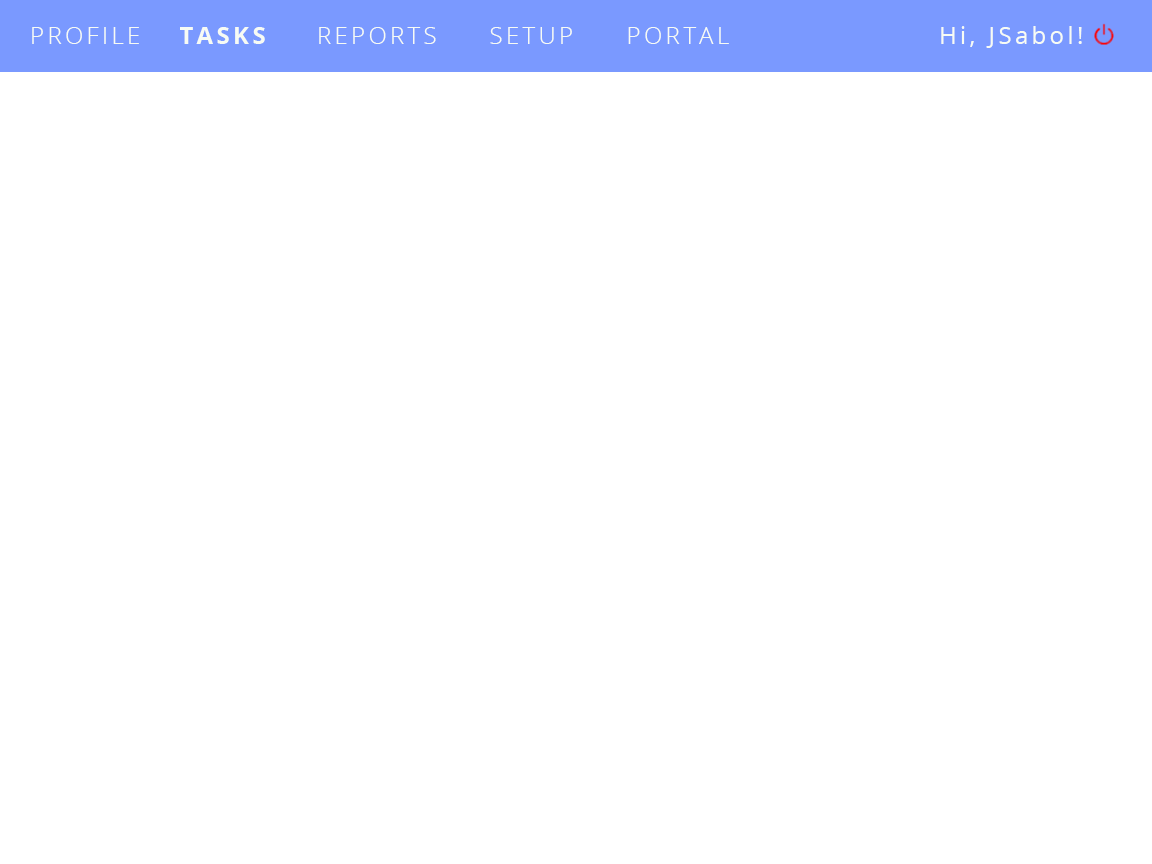
<style>
.page{position:relative;width:1152px;height:864px;background:#ffffff}
.page>*{position:absolute;margin:0}
.t1{font:24px "OpenSans-Light";letter-spacing:0.14em;color:#f7fbf4}
.t2{font:24px "OpenSans-Bold";letter-spacing:0.14em;color:#f7fbf4}
.t3{font:24px "OpenSans";letter-spacing:0.14em;color:#f7fbf4}
</style>
<div class="page">
<p class="t1" style="left:32px;top:27px;width:107px;height:17px">PROFILE</p>
<p class="t2" style="left:180px;top:27px;width:85px;height:17px">TASKS</p>
<p class="t1" style="left:319px;top:27px;width:117px;height:17px">REPORTS</p>
<p class="t1" style="left:490px;top:27px;width:82px;height:17px">SETUP</p>
<p class="t1" style="left:628px;top:27px;width:101px;height:17px">PORTAL</p>
<p class="t3" style="left:941px;top:26px;width:141px;height:22px">Hi, JSabol!</p>
</div>
